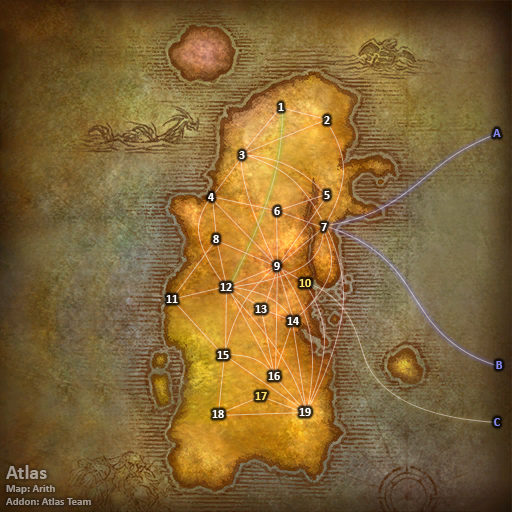
<style>
.page{position:relative;width:512px;height:512px}
.page>*{position:absolute;margin:0}
.t1{font:12px "Calibri-Bold";color:#ffffff}
.t2{font:12px "Calibri-Bold";color:#8788ee}
.t3{font:12px "Calibri-Bold";color:#fee570}
.t4{font:11px "Calibri-Bold";color:#a49b92}
.t5{font:20px "Calibri-Bold";color:#a49b92}
</style>
<div class="page">
<p class="t1" style="left:278px;top:103px;width:6px;height:8px">1</p>
<p class="t1" style="left:324px;top:116px;width:6px;height:8px">2</p>
<p class="t2" style="left:493px;top:129px;width:8px;height:8px">A</p>
<p class="t1" style="left:239px;top:151px;width:6px;height:8px">3</p>
<p class="t1" style="left:208px;top:193px;width:6px;height:8px">4</p>
<p class="t1" style="left:324px;top:191px;width:6px;height:8px">5</p>
<p class="t1" style="left:274px;top:207px;width:6px;height:8px">6</p>
<p class="t1" style="left:321px;top:223px;width:6px;height:8px">7</p>
<p class="t1" style="left:213px;top:235px;width:6px;height:8px">8</p>
<p class="t1" style="left:274px;top:262px;width:6px;height:8px">9</p>
<p class="t3" style="left:299px;top:279px;width:12px;height:8px">10</p>
<p class="t1" style="left:220px;top:283px;width:12px;height:8px">12</p>
<p class="t1" style="left:166px;top:295px;width:12px;height:8px">11</p>
<p class="t1" style="left:255px;top:305px;width:12px;height:8px">13</p>
<p class="t1" style="left:287px;top:317px;width:12px;height:8px">14</p>
<p class="t1" style="left:217px;top:351px;width:12px;height:8px">15</p>
<p class="t2" style="left:496px;top:361px;width:7px;height:8px">B</p>
<p class="t1" style="left:268px;top:372px;width:12px;height:8px">16</p>
<p class="t3" style="left:255px;top:392px;width:12px;height:8px">17</p>
<p class="t1" style="left:212px;top:410px;width:12px;height:8px">18</p>
<p class="t1" style="left:299px;top:408px;width:12px;height:8px">19</p>
<p class="t2" style="left:494px;top:418px;width:6px;height:8px">C</p>
<p class="t4" style="left:6px;top:465px;width:85px;height:40px"><span class="t5">Atlas<br></span>Map: Arith<br>Addon: Atlas Team</p>
</div>
